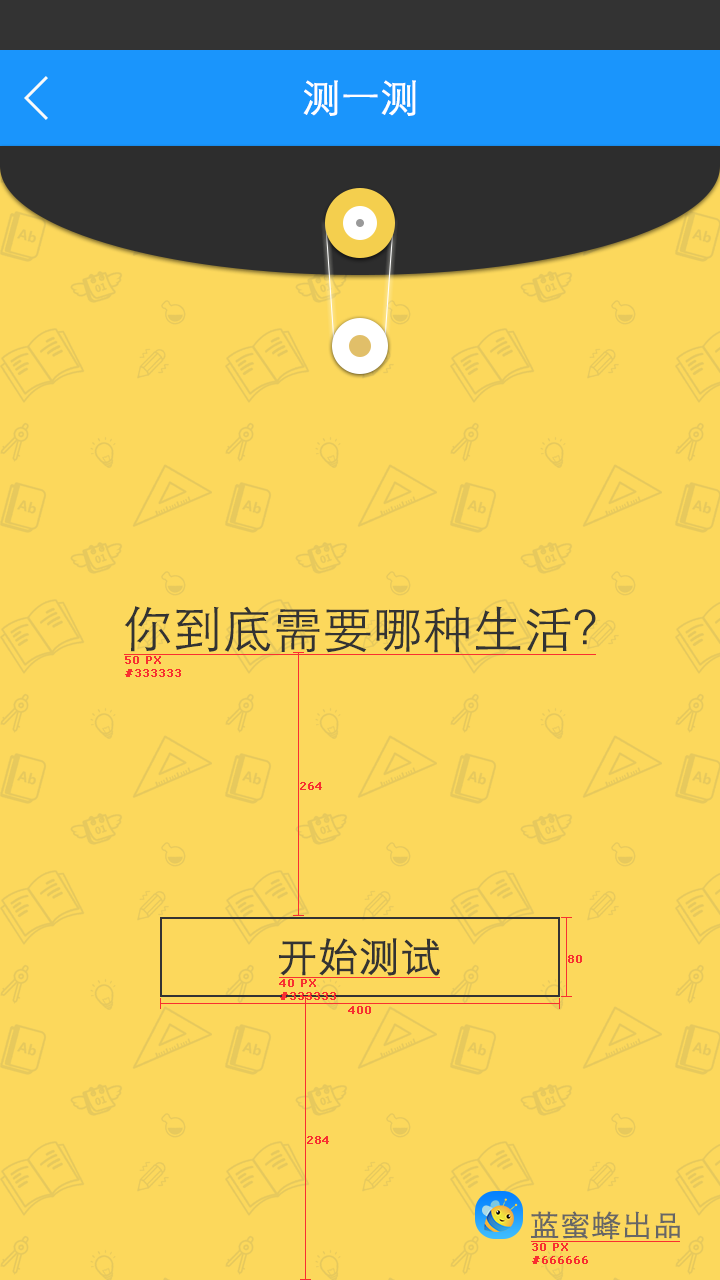
<style>
.page{position:relative;width:720px;height:1280px;background:#fcd85c}
.page>*{position:absolute;margin:0}
.t1{font:38px "STXihei";color:#ffffff;font-weight:bold}
.t2{font:50px "STXihei";color:#333333}
.t3{font:11px "Verdana";color:#f83030;font-weight:bold}
.t4{font:40px "STXihei";color:#333333;font-weight:bold}
.t5{font:30px "STXihei";color:#666666;font-weight:bold}
</style>
<div class="page">
<p class="t1" style="left:303px;top:80px;width:113px;height:36px">测一测</p>
<p class="t2" style="left:124px;top:606px;width:472px;height:47px">你到底需要哪种生活？</p>
<p class="t3" style="left:125px;top:656px;width:56px;height:21px">50 PX<br>#333333</p>
<p class="t3" style="left:300px;top:782px;width:22px;height:8px">264</p>
<p class="t4" style="left:279px;top:938px;width:161px;height:38px">开始测试</p>
<p class="t3" style="left:568px;top:955px;width:14px;height:8px">80</p>
<p class="t3" style="left:279px;top:979px;width:57px;height:21px">40 PX<br>#333333</p>
<p class="t3" style="left:348px;top:1006px;width:23px;height:8px">400</p>
<p class="t3" style="left:307px;top:1136px;width:22px;height:8px">284</p>
<p class="t5" style="left:531px;top:1211px;width:149px;height:29px">蓝蜜蜂出品</p>
<p class="t3" style="left:532px;top:1243px;width:56px;height:21px">30 PX<br>#666666</p>
</div>
